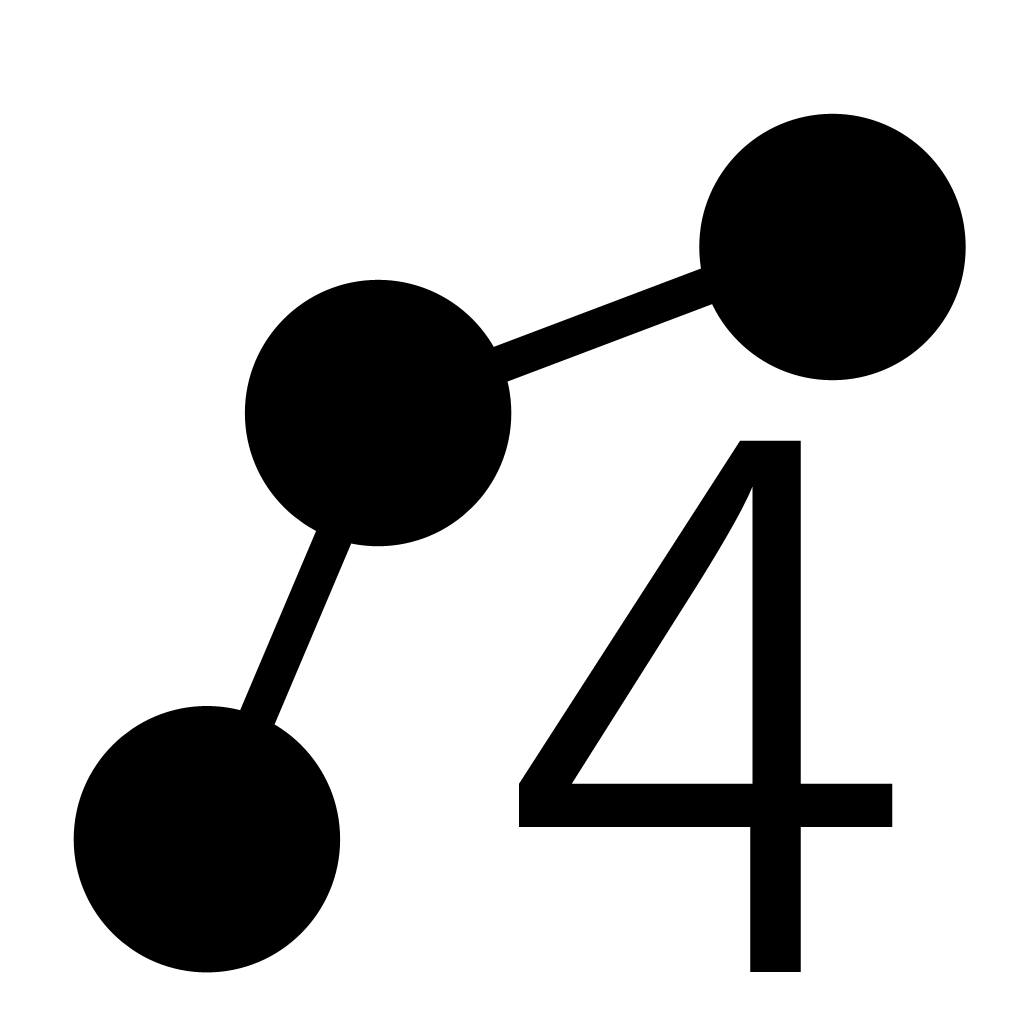
<style>
.page{position:relative;width:1024px;height:1024px;background:#ffffff}
.page>*{position:absolute;margin:0}
.t1{font:800px "CMUBright-Roman";color:#000000}
</style>
<div class="page">
<p class="t1" style="left:519px;top:440px;width:374px;height:532px">4</p>
</div>
